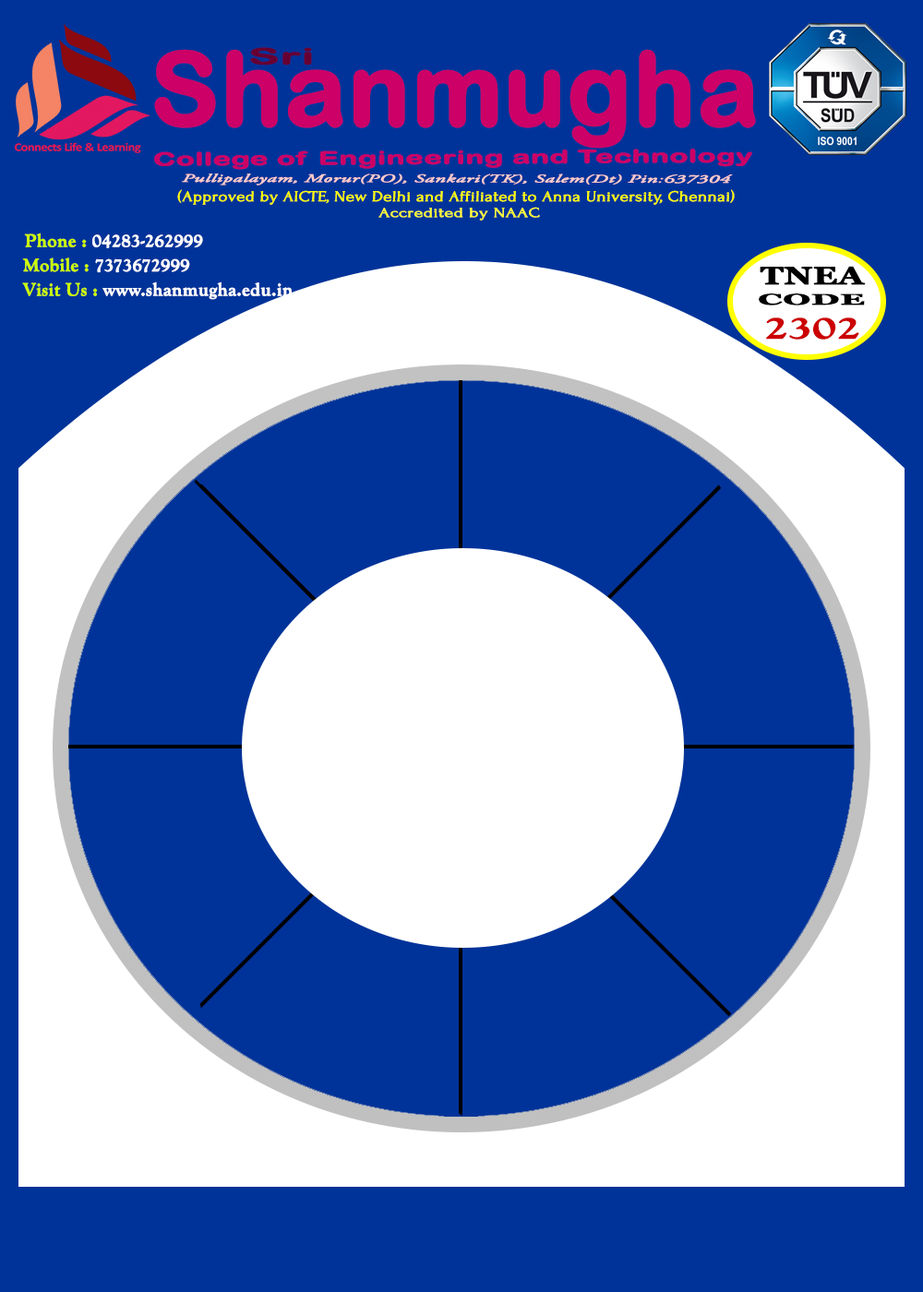
<style>
.page{position:relative;width:923px;height:1292px;background:#003399}
.page>*{position:absolute;margin:0}
.t1{font:101.5px "ArialRoundedMTBold";color:#cc0066;font-weight:bold}
.t2{font:22.3px "ArialRoundedMTBold";color:#660033;font-weight:bold;scale:2.04 1}
.t3{font:18.2px "ArialRoundedMTBold";color:#cc0066;font-weight:bold;scale:1.65 1}
.t4{font:11.3px "AGaramondPro-Italic";color:#ffcccc;font-weight:bold;scale:1.87 1}
.t5{font:15px "Forum";color:#ffff00;font-weight:bold;scale:1.17 1}
.t6{font:13.8px "Forum";color:#ffff33;font-weight:bold;scale:1.33 1}
.t7{font:18.5px "GoudyOldStyleT-Bold";color:#ffffff;font-weight:bold}
.t8{font:18.5px "GoudyOldStyleT-Bold";color:#ccff00;font-weight:bold}
.t9{font:24.6px "Georgia-Bold";color:#000000;font-weight:bold;scale:1.36 1}
.t10{font:15.1px "Georgia-Bold";color:#000000;font-weight:bold;scale:2.22 1}
.t11{font:31.7px "GoudyOldStyleT-Bold";color:#cc0000;font-weight:bold;scale:1.44 1}
</style>
<div class="page">
<p class="t1" style="left:154px;top:49px;width:602px;height:100px">Shanmugha</p>
<p class="t2" style="left:250px;top:47px;width:62px;height:19px">Sri</p>
<p class="t3" style="left:154px;top:149px;width:598px;height:21px">College of Engineering and Technology</p>
<p class="t4" style="left:182px;top:174px;width:551px;height:12px">Pullipalayam, Morur(PO), Sankari(TK), Salem(Dt) Pin:637304</p>
<p class="t5" style="left:177px;top:189px;width:558px;height:16px">(Approved by AICTE, New Delhi and Affiliated to Anna University, Chennai)</p>
<p class="t6" style="left:378px;top:207px;width:162px;height:14px">Accredited by NAAC</p>
<p class="t7" style="left:24px;top:233px;width:179px;height:15px"><span class="t8">Phone : </span>04283-262999</p>
<p class="t7" style="left:22px;top:257px;width:168px;height:16px"><span class="t8">Mobile : </span>7373672999</p>
<p class="t9" style="left:760px;top:266px;width:106px;height:19px">TNEA</p>
<p class="t7" style="left:22px;top:281px;width:271px;height:19px"><span class="t8">Visit Us : </span>www.shanmugha.edu.in</p>
<p class="t10" style="left:759px;top:293px;width:106px;height:12px">CODE</p>
<p class="t11" style="left:766px;top:317px;width:93px;height:23px">2302</p>
</div>
